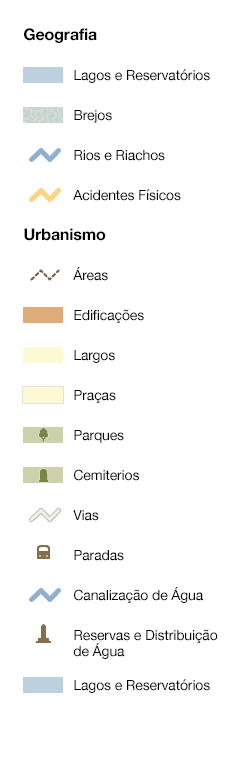
<style>
.page{position:relative;width:235px;height:768px;background:#ffffff}
.page>*{position:absolute;margin:0}
.t1{font:16px "HelveticaNeue-Bold";letter-spacing:-0.01em;color:#000000}
.t2{font:14px "HelveticaNeue";letter-spacing:-0.01em;color:#000000}
</style>
<div class="page">
<p class="t1" style="left:24px;top:28px;width:73px;height:15px">Geografia</p>
<p class="t2" style="left:74px;top:69px;width:136px;height:14px">Lagos e Reservatórios</p>
<p class="t2" style="left:74px;top:110px;width:38px;height:13px">Brejos</p>
<p class="t2" style="left:74px;top:150px;width:91px;height:11px">Rios e Riachos</p>
<p class="t2" style="left:73px;top:189px;width:108px;height:12px">Acidentes Físicos</p>
<p class="t1" style="left:24px;top:228px;width:82px;height:13px">Urbanismo</p>
<p class="t2" style="left:73px;top:267px;width:35px;height:14px">Áreas</p>
<p class="t2" style="left:74px;top:309px;width:70px;height:14px">Edificações</p>
<p class="t2" style="left:74px;top:350px;width:41px;height:13px">Largos</p>
<p class="t2" style="left:74px;top:390px;width:42px;height:13px">Praças</p>
<p class="t2" style="left:74px;top:430px;width:50px;height:13px">Parques</p>
<p class="t2" style="left:74px;top:469px;width:65px;height:12px">Cemiterios</p>
<p class="t2" style="left:73px;top:510px;width:26px;height:11px">Vias</p>
<p class="t2" style="left:74px;top:550px;width:50px;height:11px">Paradas</p>
<p class="t2" style="left:74px;top:587px;width:129px;height:16px">Canalização de Água</p>
<p class="t2" style="left:73px;top:629px;width:145px;height:30px">Reservas e Distribuição<br>de Água</p>
<p class="t2" style="left:74px;top:679px;width:136px;height:14px">Lagos e Reservatórios</p>
</div>
